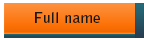
<style>
.page{position:relative;width:144px;height:40px}
.page>*{position:absolute;margin:0}
.t1{font:13.9px "BellGothicStd-Bold";color:#181818;scale:1.15 1}
</style>
<div class="page">
<p class="t1" style="left:35px;top:12px;width:65px;height:11px">Full name</p>
</div>
